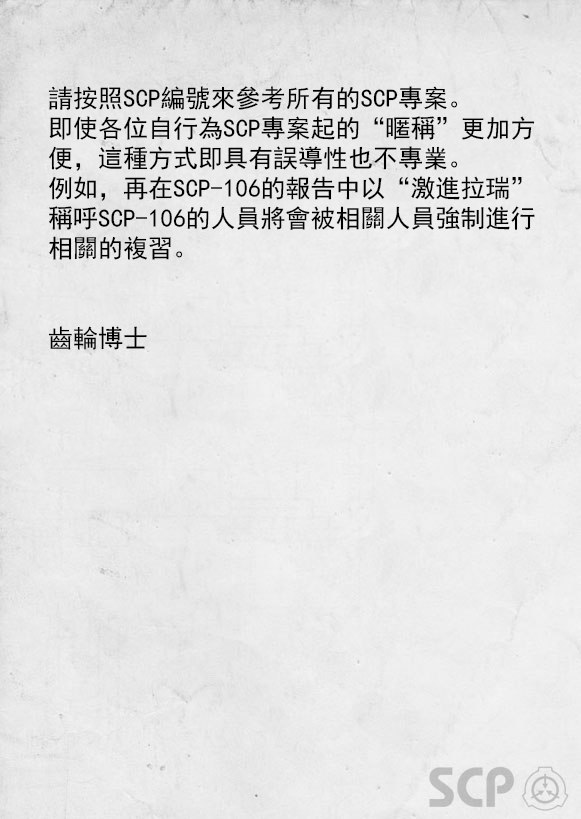
<style>
.page{position:relative;width:581px;height:819px}
.page>*{position:absolute;margin:0}
.t1{font:25px/30px "SimHei";color:#000000}
</style>
<div class="page">
<p class="t1" style="left:48px;top:86px;width:487px;height:264px">請按照SCP編號來參考所有的SCP專案。<br>即使各位自行為SCP專案起的“暱稱”更加方<br>便，這種方式即具有誤導性也不專業。<br>例如，再在SCP-106的報告中以“激進拉瑞”<br>稱呼SCP-106的人員將會被相關人員強制進行<br>相關的複習。<br><br><br>齒輪博士</p>
</div>
